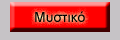
<style>
.page{position:relative;width:120px;height:40px;background:#c6c3c6}
.page>*{position:absolute;margin:0}
.t1{font:14px "ArialMT";color:#000000}
</style>
<div class="page">
<p class="t1" style="left:35px;top:11px;width:50px;height:11px">Μυστικό</p>
</div>
